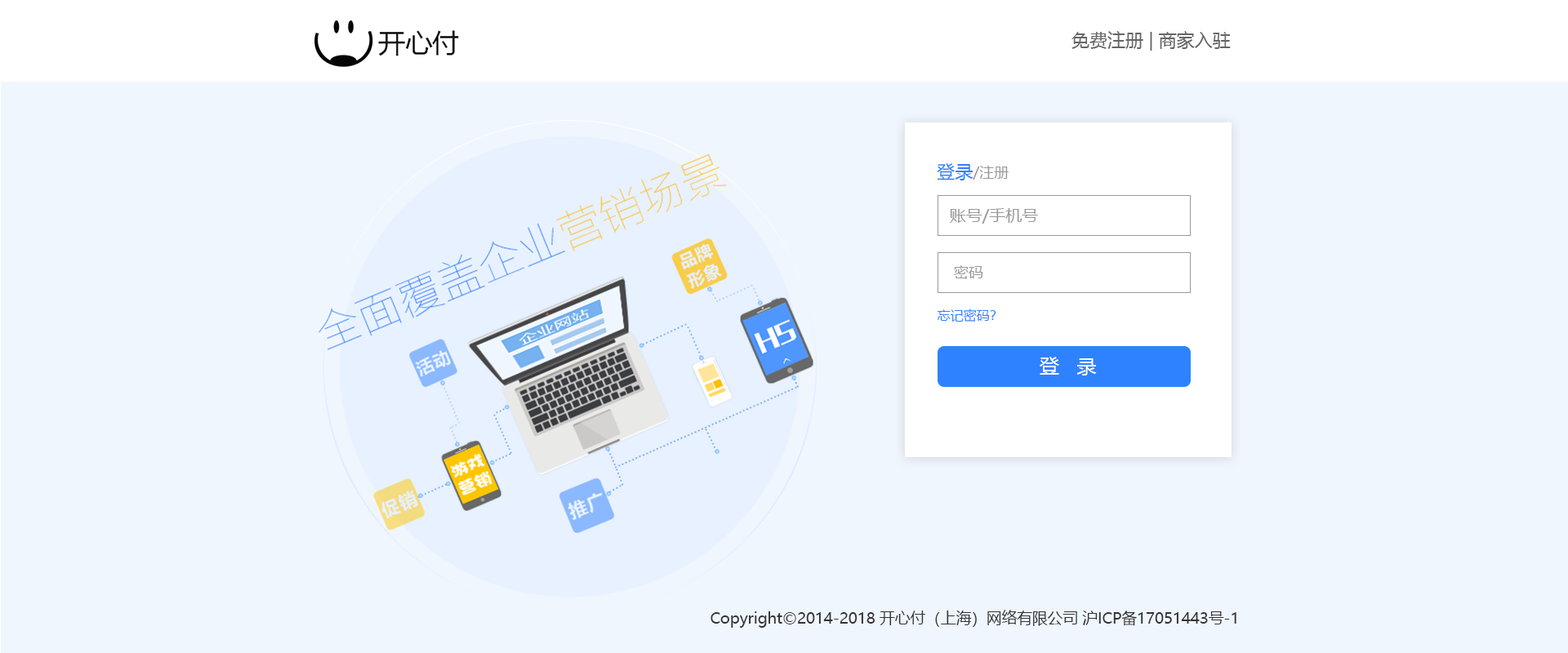
<style>
.page{position:relative;width:1568px;height:653px;background:#f0f6fe}
.page>*{position:absolute;margin:0}
.t1{font:18px "MicrosoftYaHei";color:#666666}
.t2{font:14.7px "MicrosoftYaHei";color:#999999}
.t3{font:18px "MicrosoftYaHei";color:#2f82ff}
.t4{font:16.3px "MicrosoftYaHei";color:#999999}
.t5{font:13.1px "MicrosoftYaHei";color:#2f82ff}
.t6{font:19.6px "MicrosoftYaHei";color:#ffffff}
.t7{font:15.2px "MicrosoftYaHei";color:#333333}
</style>
<div class="page">
<p class="t1" style="left:1071px;top:31px;width:160px;height:20px">免费注册 | 商家入驻</p>
<p class="t2" style="left:937px;top:163px;width:72px;height:17px"><span class="t3">登录</span>/注册</p>
<p class="t4" style="left:950px;top:208px;width:88px;height:16px">账号/手机号</p>
<p class="t2" style="left:954px;top:265px;width:29px;height:14px">密码</p>
<p class="t5" style="left:938px;top:309px;width:58px;height:13px">忘记密码？</p>
<p class="t6" style="left:1040px;top:357px;width:57px;height:19px">登   录</p>
<p class="t7" style="left:710px;top:610px;width:526px;height:18px">Copyright©2014-2018 开心付（上海）网络有限公司 沪ICP备17051443号-1</p>
</div>
